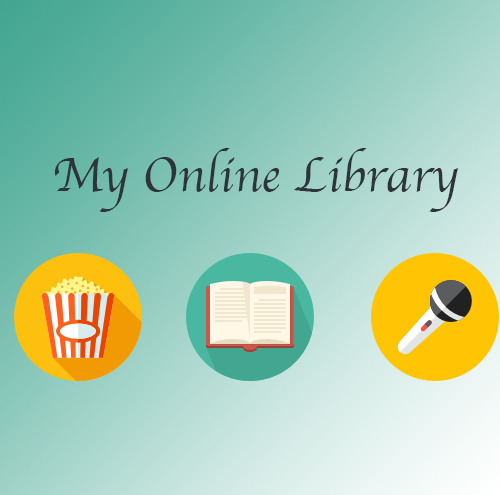
<style>
.page{position:relative;width:500px;height:495px}
.page>*{position:absolute;margin:0}
.t1{font:12px "Apple-Chancery";color:#2e353a}
</style>
<div class="page">
<p class="t1" style="left:54px;top:148px;width:405px;height:64px">My Online Library</p>
</div>
